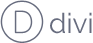
<style>
.page{position:relative;width:93px;height:43px;background:#ffffff}
.page>*{position:absolute;margin:0}
.t1{font:28px "Raleway";color:#676c7e}
</style>
<div class="page">
<p class="t1" style="left:50px;top:12px;width:42px;height:22px">divi</p>
</div>
